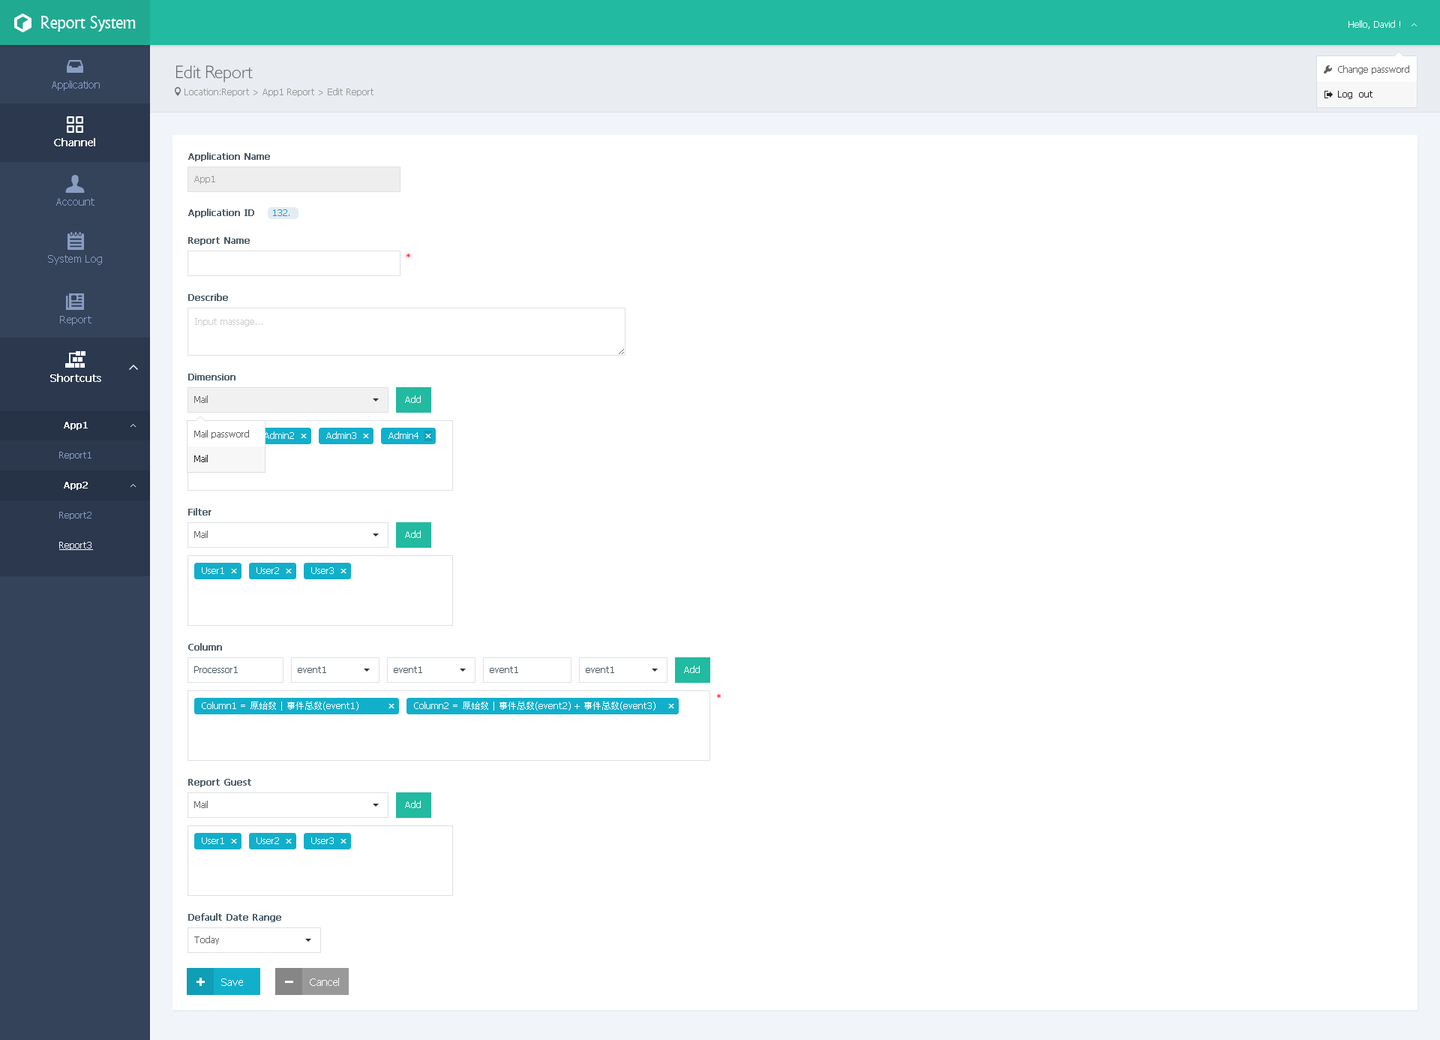
<style>
.page{position:relative;width:1440px;height:1040px;background:#ffffff}
.page>*{position:absolute;margin:0}
.t1{font:18px "Narkisim";letter-spacing:-0.022em;color:#ffffff}
.t2{font:9px "Tahoma";color:#ffffff}
.t3{font:18px "084-CAI978";color:#666666}
.t4{font:9px "Tahoma";color:#5f5f5f}
.t5{font:10.5px "Tahoma";color:#899dc1}
.t6{font:9px "Tahoma";color:#999999}
.t7{font:9px "Tahoma";color:#262626}
.t8{font:10.5px "Tahoma";color:#ffffff;font-weight:bold}
.t9{font:9px "Tahoma";color:#4e5e6a;font-weight:bold}
.t10{font:9px "Tahoma";color:#2498d0}
.t11{font:9px "Tahoma";color:#ff0000}
.t12{font:9px "Tahoma";color:#cccccc}
.t13{font:9px "Tahoma";color:#666666}
.t14{font:9px "Tahoma";color:#ffffff;font-weight:bold}
.t15{font:9px "Tahoma";color:#899dc1}
.t16{font:9px "Tahoma";color:#ffffff;text-decoration:underline}
.t17{font:9px "Tahoma";color:#4e5e6a}
.t18{font:9px "AdobeHeitiStd-Regular";color:#ffffff}
.t19{font:10.5px "Tahoma";color:#ffffff}
</style>
<div class="page">
<p class="t1" style="left:40px;top:16px;width:96px;height:16px">Report System</p>
<p class="t2" style="left:1348px;top:20px;width:52px;height:9px">Hello, David !</p>
<p class="t3" style="left:176px;top:65px;width:77px;height:17px">Edit Report</p>
<p class="t4" style="left:1338px;top:65px;width:71px;height:9px">Change password</p>
<p class="t5" style="left:52px;top:80px;width:48px;height:11px">Application</p>
<p class="t6" style="left:184px;top:88px;width:190px;height:9px">Location:Report &gt; App1 Report &gt; Edit Report</p>
<p class="t7" style="left:1338px;top:91px;width:34px;height:8px">Log  out</p>
<p class="t8" style="left:54px;top:138px;width:41px;height:8px">Channel</p>
<p class="t9" style="left:188px;top:152px;width:82px;height:9px">Application Name</p>
<p class="t6" style="left:194px;top:176px;width:21px;height:8px">App1</p>
<p class="t5" style="left:56px;top:198px;width:38px;height:8px">Account</p>
<p class="t9" style="left:188px;top:208px;width:66px;height:10px">Application ID</p>
<p class="t10" style="left:273px;top:209px;width:17px;height:7px">132.</p>
<p class="t9" style="left:188px;top:237px;width:62px;height:8px">Report Name</p>
<p class="t5" style="left:48px;top:255px;width:54px;height:10px">System Log</p>
<p class="t11" style="left:406px;top:254px;width:4px;height:3px">*</p>
<p class="t9" style="left:188px;top:293px;width:40px;height:8px">Describe</p>
<p class="t5" style="left:60px;top:316px;width:32px;height:10px">Report</p>
<p class="t12" style="left:195px;top:318px;width:67px;height:8px">Input massage...</p>
<p class="t8" style="left:50px;top:374px;width:51px;height:8px">Shortcuts</p>
<p class="t9" style="left:188px;top:374px;width:48px;height:6px">Dimension</p>
<p class="t13" style="left:194px;top:395px;width:14px;height:8px">Mail</p>
<p class="t2" style="left:405px;top:395px;width:16px;height:8px">Add</p>
<p class="t14" style="left:64px;top:422px;width:24px;height:8px">App1</p>
<p class="t4" style="left:194px;top:430px;width:55px;height:9px">Mail password</p>
<p class="t2" style="left:264px;top:431px;width:30px;height:8px">Admin2</p>
<p class="t2" style="left:326px;top:431px;width:30px;height:8px">Admin3</p>
<p class="t2" style="left:388px;top:431px;width:30px;height:8px">Admin4</p>
<p class="t15" style="left:59px;top:452px;width:33px;height:8px">Report1</p>
<p class="t7" style="left:194px;top:454px;width:14px;height:8px">Mail</p>
<p class="t14" style="left:64px;top:482px;width:24px;height:8px">App2</p>
<p class="t9" style="left:188px;top:508px;width:24px;height:7px">Filter</p>
<p class="t15" style="left:59px;top:512px;width:33px;height:8px">Report2</p>
<p class="t13" style="left:194px;top:530px;width:14px;height:8px">Mail</p>
<p class="t2" style="left:405px;top:530px;width:16px;height:8px">Add</p>
<p class="t16" style="left:59px;top:542px;width:34px;height:8px">Report3</p>
<p class="t2" style="left:202px;top:567px;width:22px;height:7px">User1</p>
<p class="t2" style="left:256px;top:567px;width:23px;height:7px">User2</p>
<p class="t2" style="left:311px;top:567px;width:23px;height:7px">User3</p>
<p class="t9" style="left:188px;top:643px;width:34px;height:7px">Column</p>
<p class="t2" style="left:684px;top:665px;width:16px;height:8px">Add</p>
<p class="t17" style="left:194px;top:666px;width:44px;height:7px">Processor1</p>
<p class="t17" style="left:298px;top:666px;width:28px;height:7px">event1</p>
<p class="t17" style="left:394px;top:666px;width:28px;height:7px">event1</p>
<p class="t17" style="left:490px;top:666px;width:28px;height:7px">event1</p>
<p class="t17" style="left:586px;top:666px;width:28px;height:7px">event1</p>
<p class="t2" style="left:202px;top:701px;width:156px;height:9px">Column1 = <span class="t18">原始数</span> | <span class="t18">事件总数</span>(event1)</p>
<p class="t2" style="left:414px;top:701px;width:242px;height:9px">Column2 = <span class="t18">原始数</span> | <span class="t18">事件总数</span>(event2) + <span class="t18">事件总数</span>(event3)</p>
<p class="t11" style="left:717px;top:694px;width:4px;height:4px">*</p>
<p class="t9" style="left:188px;top:778px;width:63px;height:9px">Report Guest</p>
<p class="t13" style="left:194px;top:800px;width:14px;height:8px">Mail</p>
<p class="t2" style="left:405px;top:800px;width:16px;height:8px">Add</p>
<p class="t2" style="left:202px;top:837px;width:22px;height:7px">User1</p>
<p class="t2" style="left:256px;top:837px;width:23px;height:7px">User2</p>
<p class="t2" style="left:311px;top:837px;width:23px;height:7px">User3</p>
<p class="t9" style="left:188px;top:913px;width:93px;height:9px">Default Date Range</p>
<p class="t13" style="left:194px;top:935px;width:25px;height:9px">Today</p>
<p class="t19" style="left:310px;top:977px;width:29px;height:9px">Cancel</p>
<p class="t19" style="left:221px;top:978px;width:22px;height:8px">Save</p>
</div>
